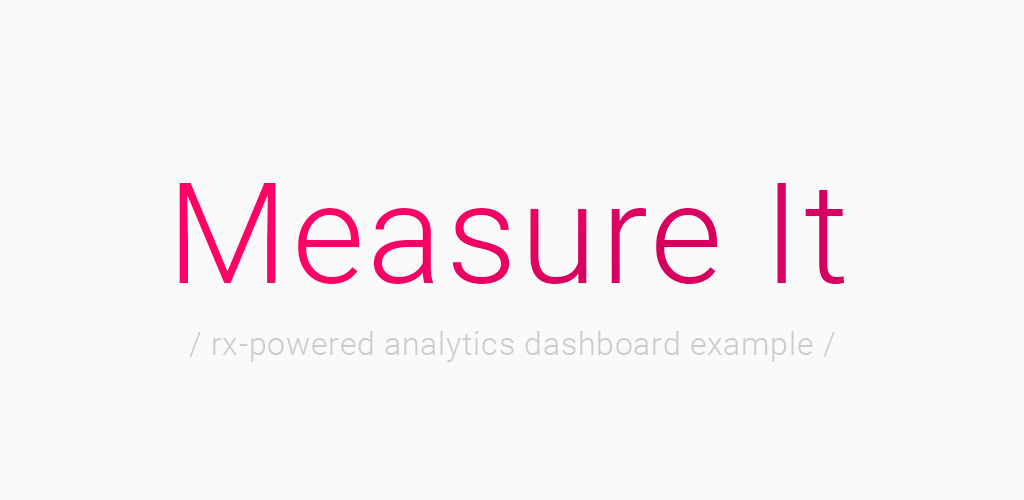
<style>
.page{position:relative;width:1024px;height:500px;background:#fafafa}
.page>*{position:absolute;margin:0}
.t1{font:140px "Roboto-Light";letter-spacing:0.025em}
.t2{font:32px "Roboto-Light";letter-spacing:0.025em;color:#cccccc}
</style>
<div class="page">
<p class="t1" style="left:179px;top:183px;width:665px;height:101px">Measure It</p>
<p class="t2" style="left:189px;top:331px;width:646px;height:31px">/ rx-powered analytics dashboard example /</p>
</div>
